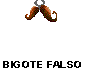
<style>
.page{position:relative;width:86px;height:68px;background:#ffffff}
.page>*{position:absolute;margin:0}
.t1{font:10.3px "Arial-BoldMT";color:#000000;scale:1.11 1}
</style>
<div class="page">
<p class="t1" style="left:3px;top:61px;width:78px;height:7px">BIGOTE FALSO</p>
</div>
